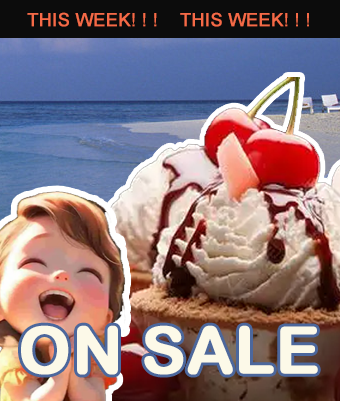
<style>
.page{position:relative;width:340px;height:401px}
.page>*{position:absolute;margin:0}
.t1{font:18px "ArialMT";color:#f56a47;font-weight:bold}
.t2{font:65px "ArialRoundedMTBold";color:#fcf9e8;font-weight:bold}
</style>
<div class="page">
<p class="t1" style="left:27px;top:12px;width:282px;height:15px">THIS WEEK! ! !    THIS WEEK! ! !</p>
<p class="t2" style="left:21px;top:325px;width:297px;height:50px;rotate:-90deg">ON SALE</p>
</div>
